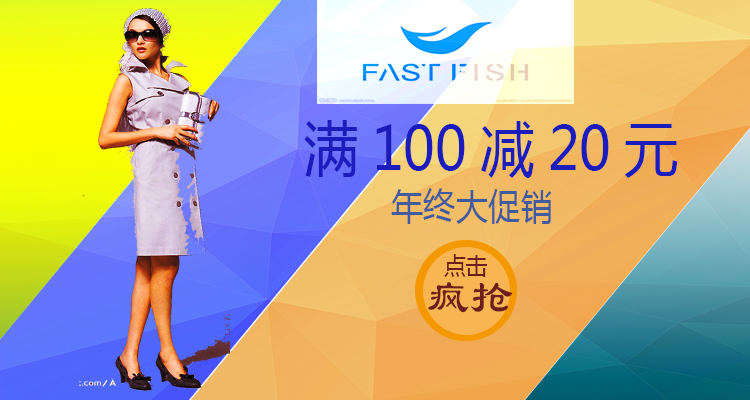
<style>
.page{position:relative;width:750px;height:400px}
.page>*{position:absolute;margin:0}
.t1{font:60px "MicrosoftYaHei";color:#1c1cbd;scale:0.9 1}
.t2{font:36px "MicrosoftYaHei";color:#415b9e;scale:0.9 1}
.t3{font:24px "MicrosoftYaHei";color:#6e1c1c;scale:0.9 1}
.t4{font:48px "LiSu";color:#6e1c1c;scale:0.9 1}
</style>
<div class="page">
<p class="t1" style="left:304px;top:120px;width:374px;height:58px">满100减20元</p>
<p class="t2" style="left:391px;top:188px;width:161px;height:36px">年终大促销</p>
<p class="t3" style="left:444px;top:254px;width:44px;height:23px">点击</p>
<p class="t4" style="left:428px;top:282px;width:85px;height:31px">疯抢</p>
</div>
